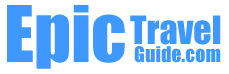
<style>
.page{position:relative;width:229px;height:74px;background:#ffffff}
.page>*{position:absolute;margin:0}
.t1{font:72px "Impact";color:#3f98fd}
.t2{font:36px "Impact";color:#3f98fd}
.t3{font:20px "Impact";color:#3f98fd}
</style>
<div class="page">
<p class="t1" style="left:7px;top:5px;width:118px;height:64px">Epic</p>
<p class="t2" style="left:130px;top:15px;width:91px;height:30px">Travel</p>
<p class="t3" style="left:134px;top:46px;width:87px;height:17px">Guide.com</p>
</div>
